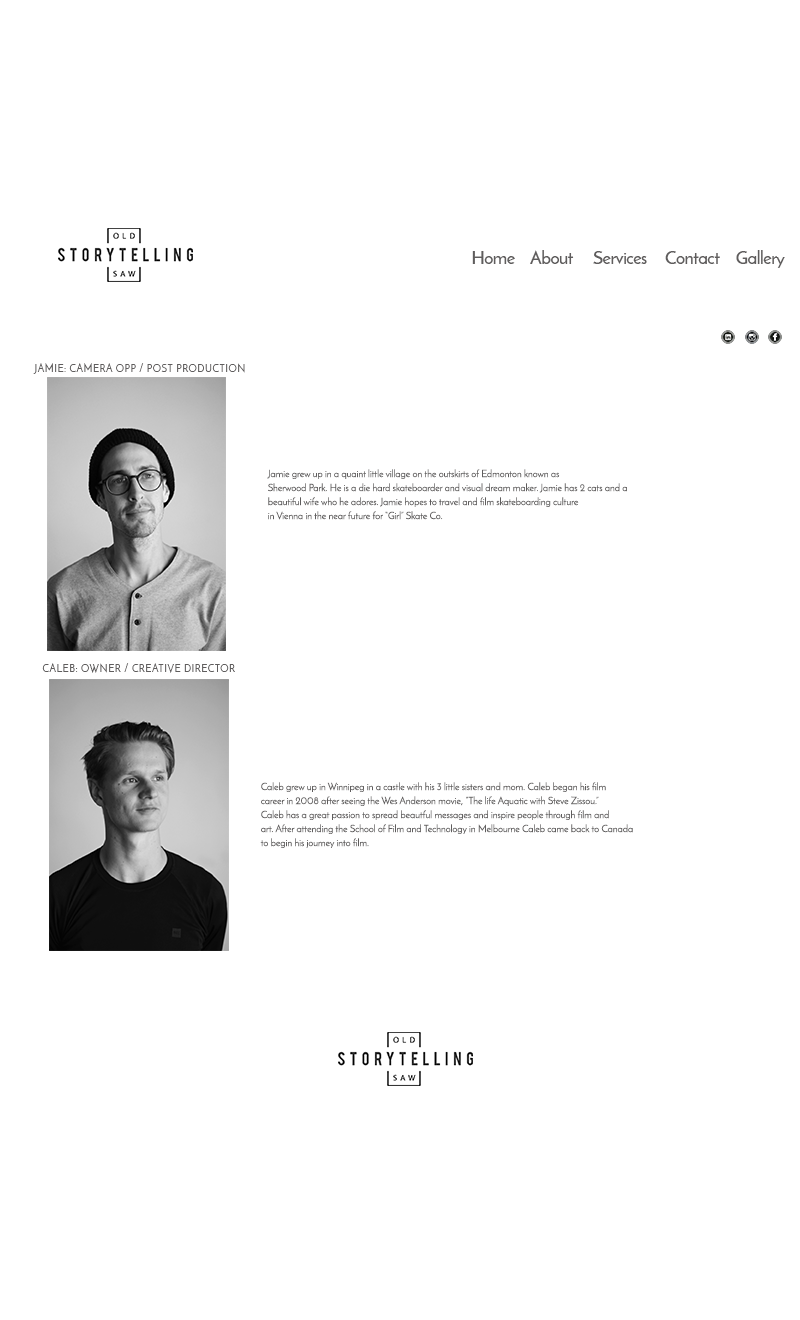
<style>
.page{position:relative;width:800px;height:1320px;background:#ffffff}
.page>*{position:absolute;margin:0}
.t1{font:18px "JosefinSans-SemiBold";letter-spacing:-0.025em;color:#5f5d5d}
.t2{font:10px "JosefinSans";letter-spacing:0.05em;color:#5f5d5d}
.t3{font:10px/14px "JosefinSans";letter-spacing:-0.01em;color:#5f5d5d}
</style>
<div class="page">
<p class="t1" style="left:472px;top:251px;width:43px;height:13px">Home</p>
<p class="t1" style="left:530px;top:250px;width:44px;height:14px">About</p>
<p class="t1" style="left:593px;top:251px;width:54px;height:13px">Services</p>
<p class="t1" style="left:665px;top:251px;width:55px;height:13px">Contact</p>
<p class="t1" style="left:736px;top:250px;width:49px;height:18px">Gallery</p>
<p class="t2" style="left:33px;top:363px;width:212px;height:11px">JAMIE: CAMERA OPP / POST PRODUCTION</p>
<p class="t3" style="left:267px;top:469px;width:360px;height:51px">Jamie grew up in a quaint little village on the outskirts of Edmonton known as <br>Sherwood Park. He is a die hard skateboarder and visual dream maker. Jamie has 2 cats and a <br>beautiful wife who he adores. Jamie hopes to travel and film skateboarding culture <br>in Vienna in the near future for “Girl” Skate Co.</p>
<p class="t2" style="left:42px;top:663px;width:193px;height:10px">CALEB: OWNER / CREATIVE DIRECTOR</p>
<p class="t3" style="left:260px;top:782px;width:373px;height:66px">Caleb grew up in Winnipeg in a castle with his 3 little sisters and mom. Caleb began his film <br>career in 2008 after seeing the Wes Anderson movie, “The life Aquatic with Steve Zissou.”<br>Caleb has a great passion to spread beautful messages and inspire people through film and  <br>art. After attending the School of Film and Technology in Melbourne Caleb came back to Canada <br>to begin his journey into film.</p>
</div>
